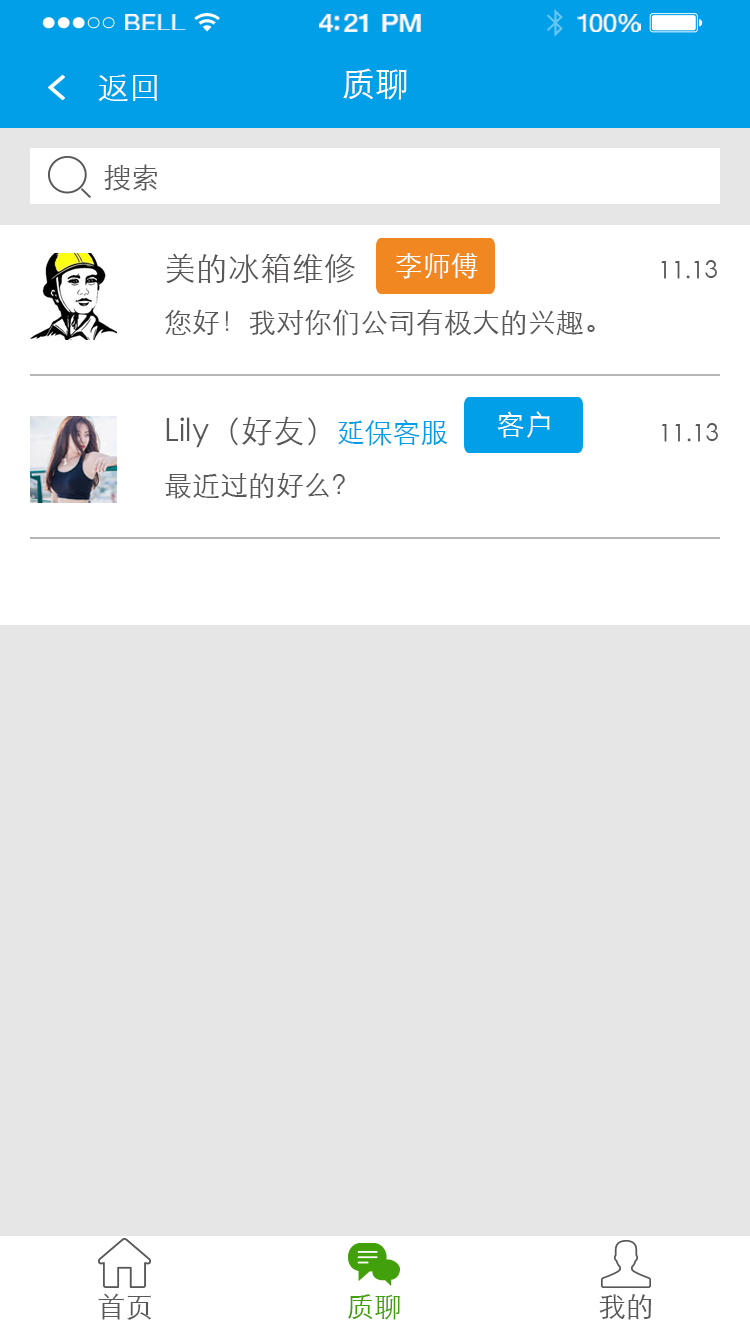
<style>
.page{position:relative;width:750px;height:1334px;background:#e6e6e6}
.page>*{position:absolute;margin:0}
.t1{font:23.3px "HelveticaNeue";letter-spacing:0.02em;color:#ffffff;scale:1.06 1}
.t2{font:25.3px "HelveticaNeue-Medium";letter-spacing:-0.02em;color:#ffffff;scale:1.06 1}
.t3{font:24.3px "HelveticaNeue";letter-spacing:-0.02em;color:#ffffff;scale:1.06 1}
.t4{font:32px "STXihei";color:#ffffff}
.t5{font:34px "STXihei";color:#ffffff}
.t6{font:28px "STXihei";color:#595757}
.t7{font:28px/56px "STXihei";color:#595757}
.t8{font:32px/56px "STXihei";color:#595757}
.t9{font:24px/56px "STXihei";color:#595757}
.t10{font:28px "STXihei";color:#ffffff}
.t11{font:28px/56px "STXihei";color:#009fe8}
.t12{font:28px "STXihei";color:#42a00a}
</style>
<div class="page">
<p class="t1" style="left:125px;top:14px;width:61px;height:16px">BELL</p>
<p class="t2" style="left:319px;top:14px;width:102px;height:18px">4:21 PM</p>
<p class="t3" style="left:577px;top:14px;width:64px;height:18px">100%</p>
<p class="t4" style="left:98px;top:74px;width:59px;height:27px">返回</p>
<p class="t5" style="left:343px;top:68px;width:64px;height:32px">质聊</p>
<p class="t6" style="left:104px;top:164px;width:53px;height:27px">搜索</p>
<p class="t7" style="left:165px;top:253px;width:552px;height:83px"><span class="t8">美的冰箱维修                                          </span><span class="t9">11.13</span><br>您好！我对你们公司有极大的兴趣。</p>
<p class="t10" style="left:396px;top:253px;width:82px;height:26px">李师傅</p>
<p class="t10" style="left:497px;top:411px;width:53px;height:27px">客户</p>
<p class="t8" style="left:165px;top:416px;width:553px;height:83px">Lily（好友）<span class="t11">延保客服                              </span><span class="t9">11.13</span><span class="t7"><br>最近过的好么？</span></p>
<p class="t6" style="left:98px;top:1293px;width:53px;height:27px">首页</p>
<p class="t12" style="left:348px;top:1294px;width:52px;height:26px">质聊</p>
<p class="t6" style="left:599px;top:1294px;width:53px;height:26px">我的</p>
</div>
